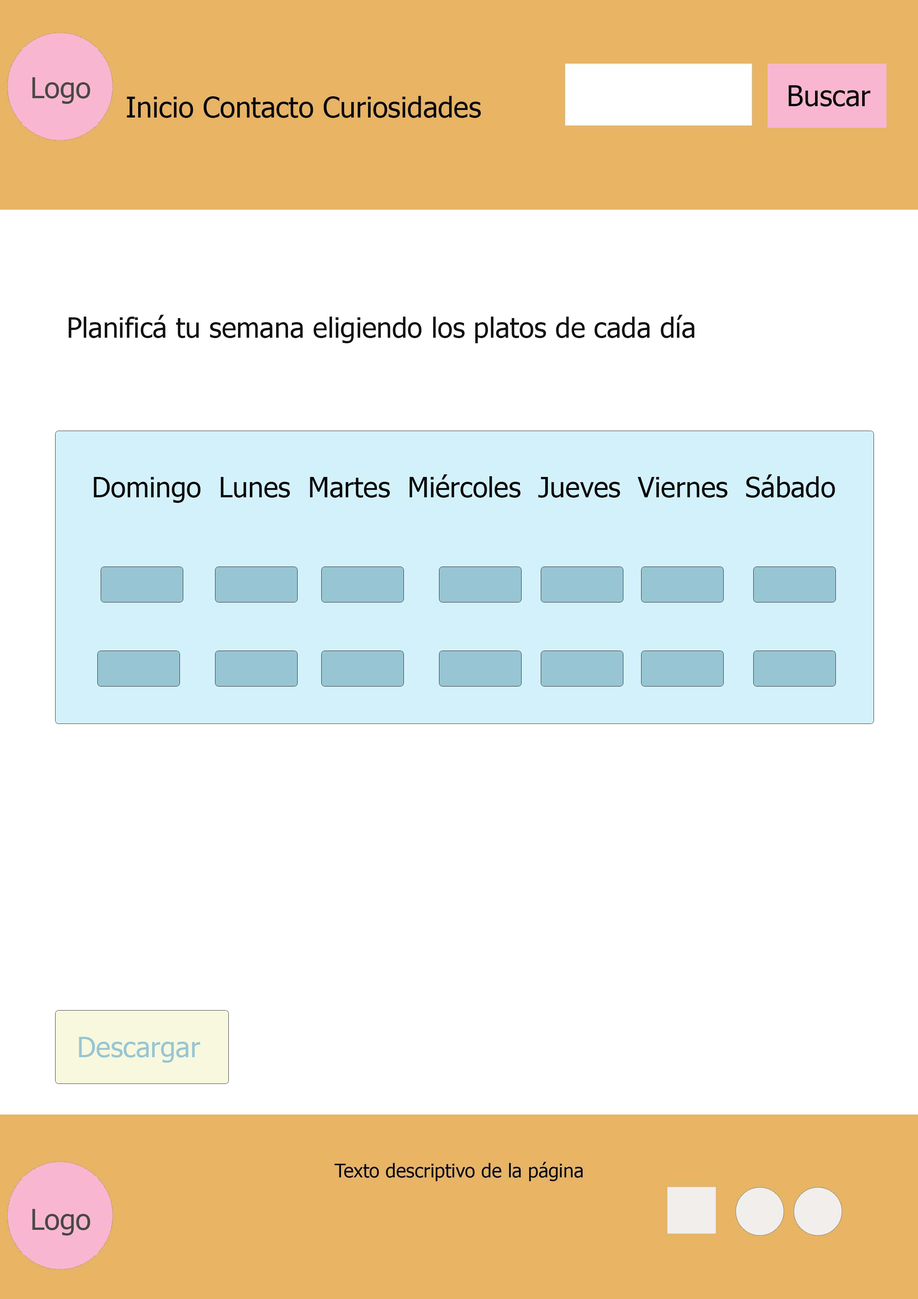
<style>
.page{position:relative;width:918px;height:1299px;background:#ffffff}
.page>*{position:absolute;margin:0}
.t1{font:27.8px "Tahoma";color:#121112}
.t2{font:27.8px "Tahoma";color:#080708}
.t3{font:27.8px "Tahoma";color:#98c5d3}
</style>
<div class="page">
<p class="t1" style="left:68px;top:315px;width:627px;height:28px">Planificá tu semana eligiendo los platos de cada día</p>
<p class="t2" style="left:94px;top:474px;width:741px;height:29px">Domingo  Lunes  Martes  Miércoles  Jueves  Viernes  Sábado</p>
<p class="t3" style="left:79px;top:1037px;width:121px;height:26px">Descargar</p>
</div>
